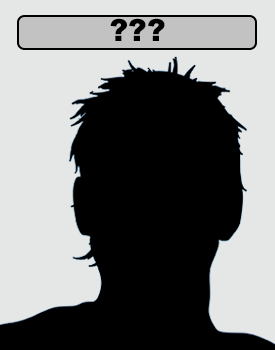
<style>
.page{position:relative;width:275px;height:350px;background:#e5e6e6}
.page>*{position:absolute;margin:0}
.t1{font:30.6px "Arial-Black";color:#010101}
</style>
<div class="page">
<p class="t1" style="left:110px;top:18px;width:55px;height:23px">???</p>
</div>
